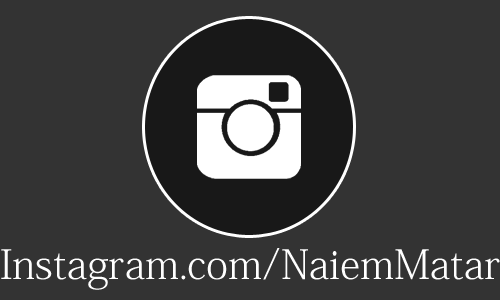
<style>
.page{position:relative;width:500px;height:300px;background:#333333}
.page>*{position:absolute;margin:0}
.t1{font:40.2px "AdobeFangsongStd-Regular";color:#ffffff}
</style>
<div class="page">
<p class="t1" style="left:1px;top:248px;width:499px;height:42px">Instagram.com/NaiemMatar</p>
</div>
